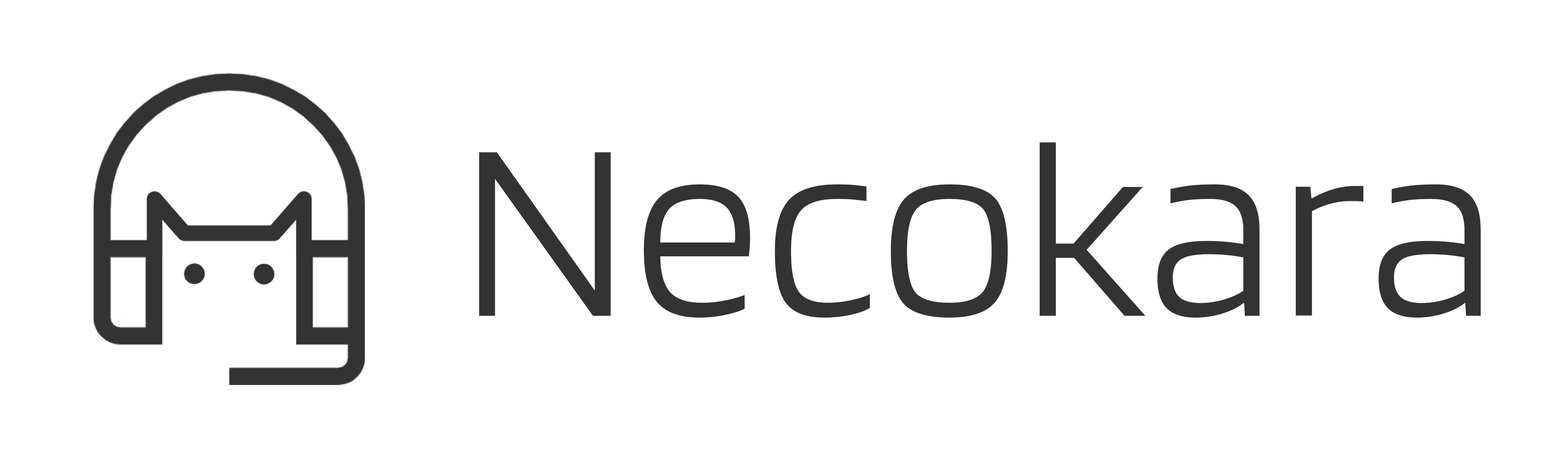
<style>
.page{position:relative;width:1568px;height:458px;background:#ffffff}
.page>*{position:absolute;margin:0}
.t1{font:261.2px "Blinker-ExtraLight";color:#333333}
</style>
<div class="page">
<p class="t1" style="left:479px;top:142px;width:1002px;height:176px">Necokara</p>
</div>
